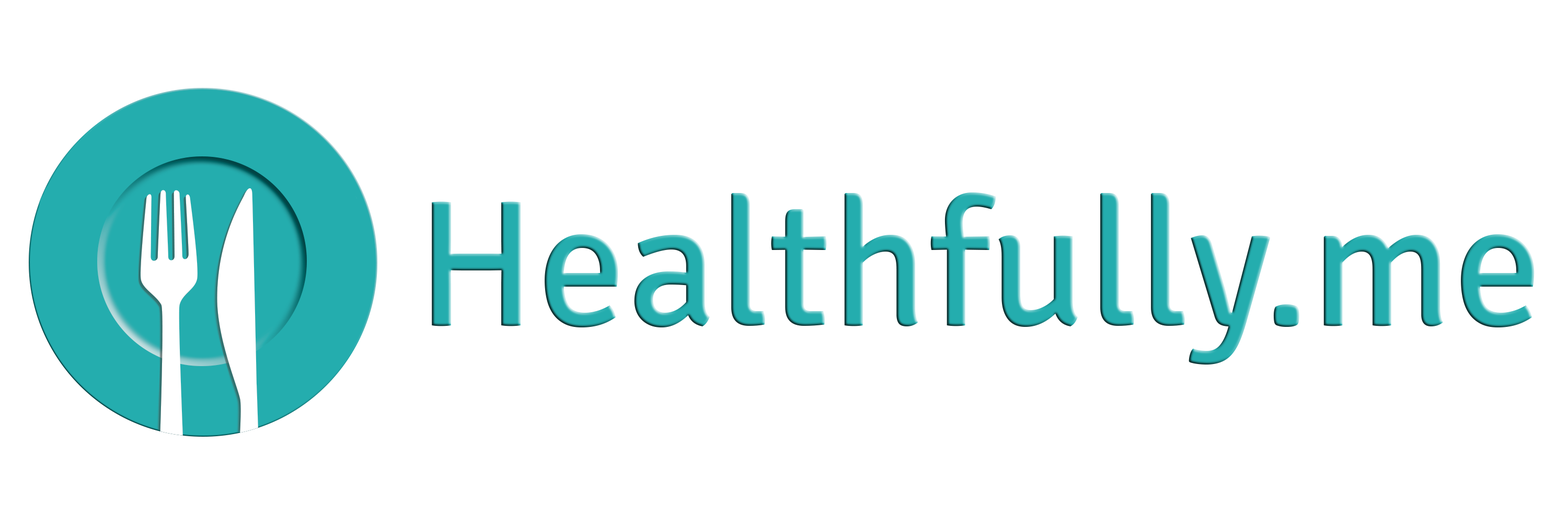
<style>
.page{position:relative;width:1568px;height:523px;background:#ffffff}
.page>*{position:absolute;margin:0}
.t1{font:179.8px "Signika-Regular";color:#24adae}
</style>
<div class="page">
<p class="t1" style="left:432px;top:192px;width:1103px;height:172px">Healthfully.me</p>
</div>
